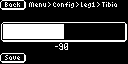
<style>
.page{position:relative;width:128px;height:64px;background:#000000}
.page>*{position:absolute;margin:0}
.t1{font:8px "6pxNormal";color:#ffffff}
.t2{font:12px "PixelOperator";color:#ffffff}
</style>
<div class="page">
<p class="t1" style="left:5px;top:2px;width:15px;height:5px">Back</p>
<p class="t1" style="left:29px;top:2px;width:17px;height:5px">Menu</p>
<p class="t1" style="left:48px;top:2px;width:3px;height:5px">&gt;</p>
<p class="t1" style="left:53px;top:2px;width:21px;height:6px">Config</p>
<p class="t1" style="left:76px;top:2px;width:3px;height:5px">&gt;</p>
<p class="t1" style="left:81px;top:2px;width:14px;height:6px">Leg1</p>
<p class="t1" style="left:97px;top:2px;width:3px;height:5px">&gt;</p>
<p class="t1" style="left:102px;top:2px;width:15px;height:5px">Tibia</p>
<p class="t2" style="left:54px;top:43px;width:15px;height:7px">-90</p>
<p class="t1" style="left:5px;top:55px;width:15px;height:5px">Save</p>
</div>
